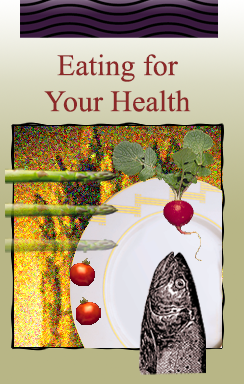
<style>
.page{position:relative;width:244px;height:384px}
.page>*{position:absolute;margin:0}
.t1{font:30px "TimesNewRomanPSMT";color:#8c2828}
</style>
<div class="page">
<p class="t1" style="left:44px;top:54px;width:147px;height:58px;text-align:center">Eating for Your Health</p>
</div>
